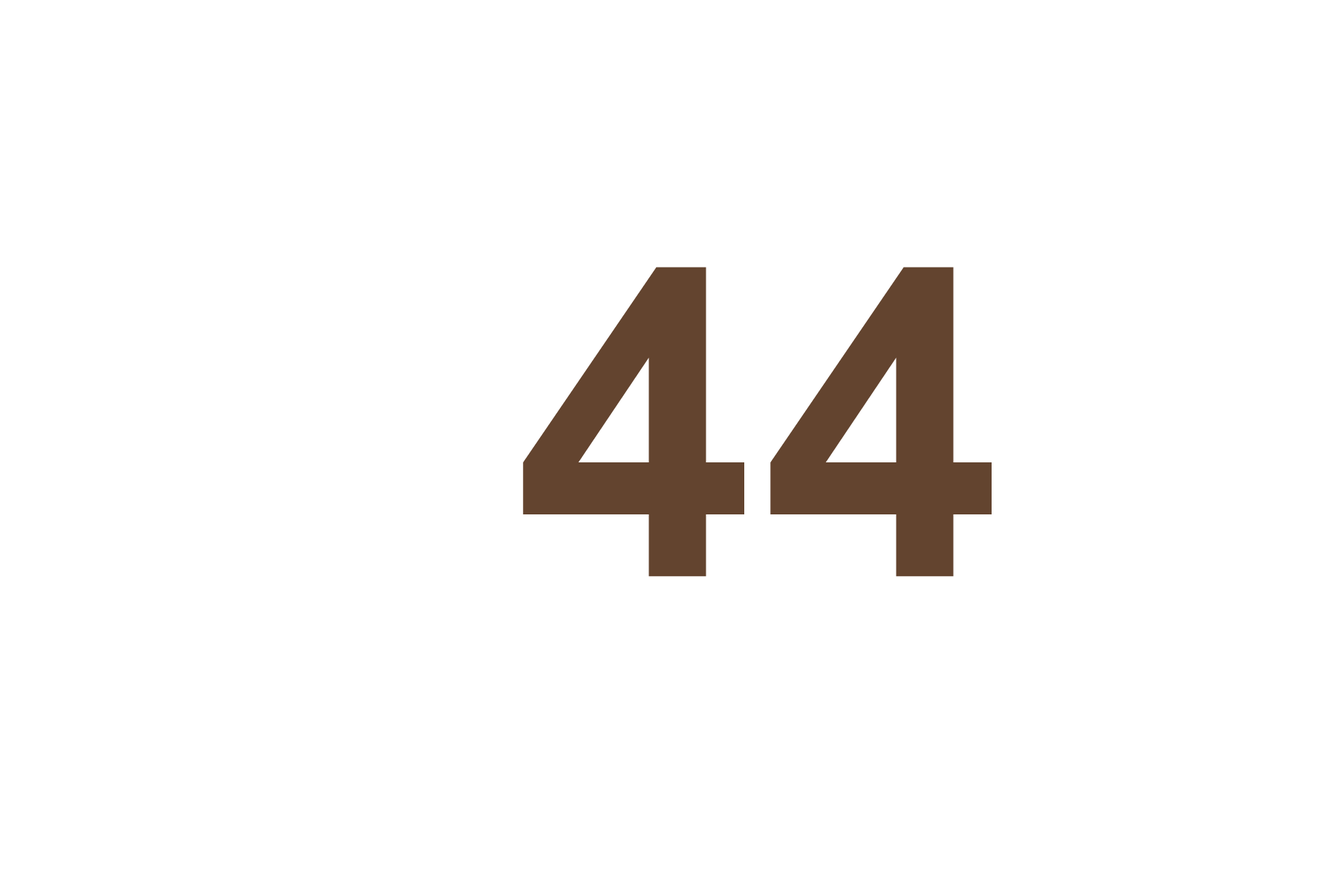
<style>
.page{position:relative;width:1337px;height:892px;background:#ffffff}
.page>*{position:absolute;margin:0}
.t1{font:429.6px "Arial-BoldMT";color:#63442f}
</style>
<div class="page">
<p class="t1" style="left:523px;top:267px;width:469px;height:310px">44</p>
</div>
